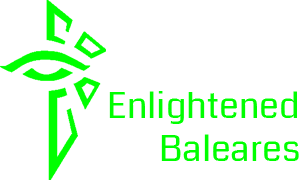
<style>
.page{position:relative;width:300px;height:180px;background:#ffffff}
.page>*{position:absolute;margin:0}
.t1{font:36px "Coda-Regular";color:#00ff00}
</style>
<div class="page">
<p class="t1" style="left:109px;top:91px;width:190px;height:70px;text-align:right">Enlightened Baleares</p>
</div>
